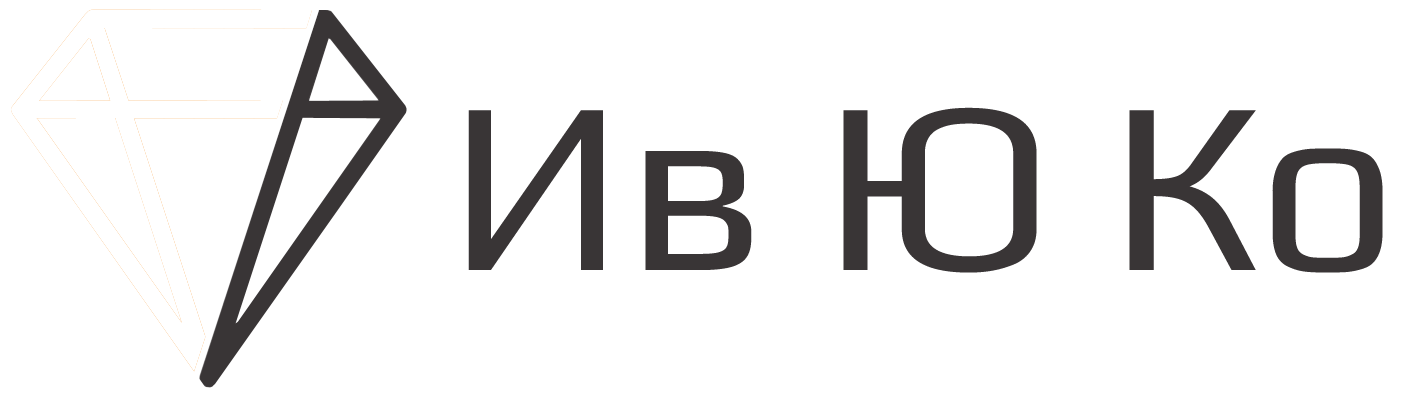
<style>
.page{position:relative;width:1424px;height:395px;background:#ffffff}
.page>*{position:absolute;margin:0}
.t1{font:245.9px "Play-Regular";color:#393536}
</style>
<div class="page">
<p class="t1" style="left:468px;top:107px;width:915px;height:166px">Ив Ю Ко</p>
</div>
